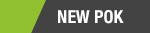
<style>
.page{position:relative;width:150px;height:33px;background:#434343}
.page>*{position:absolute;margin:0}
.t1{font:18px "HelveticaNeueLTStd-BdCn";color:#ffffff}
</style>
<div class="page">
<p class="t1" style="left:58px;top:10px;width:66px;height:14px">NEW POK</p>
</div>
